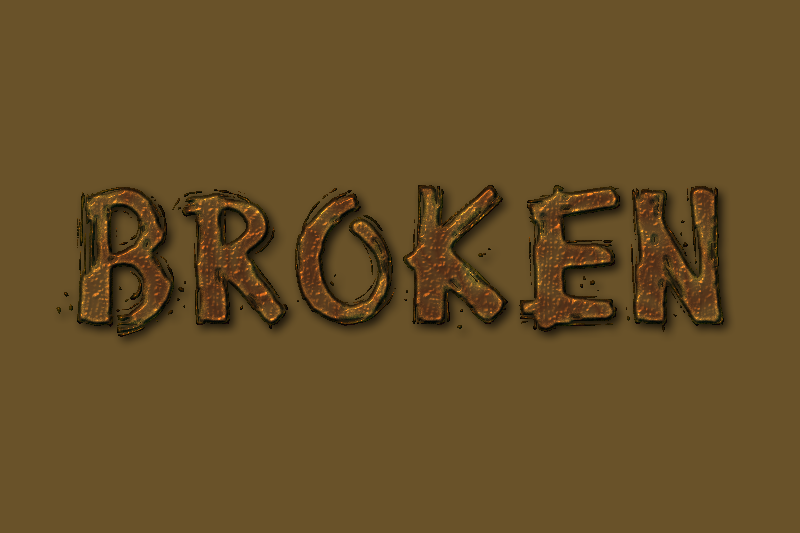
<style>
.page{position:relative;width:800px;height:533px;background:#695229}
.page>*{position:absolute;margin:0}
.t1{font:200px "BrokenStick"}
</style>
<div class="page">
<p class="t1" style="left:56px;top:185px;width:668px;height:152px">Broken</p>
</div>
